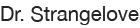
<style>
.page{position:relative;width:140px;height:28px;background:#ffffff}
.page>*{position:absolute;margin:0}
.t1{font:20.3px "HelveticaNeue";color:#242424}
</style>
<div class="page">
<p class="t1" style="left:1px;top:6px;width:138px;height:19px">Dr. Strangelove</p>
</div>
